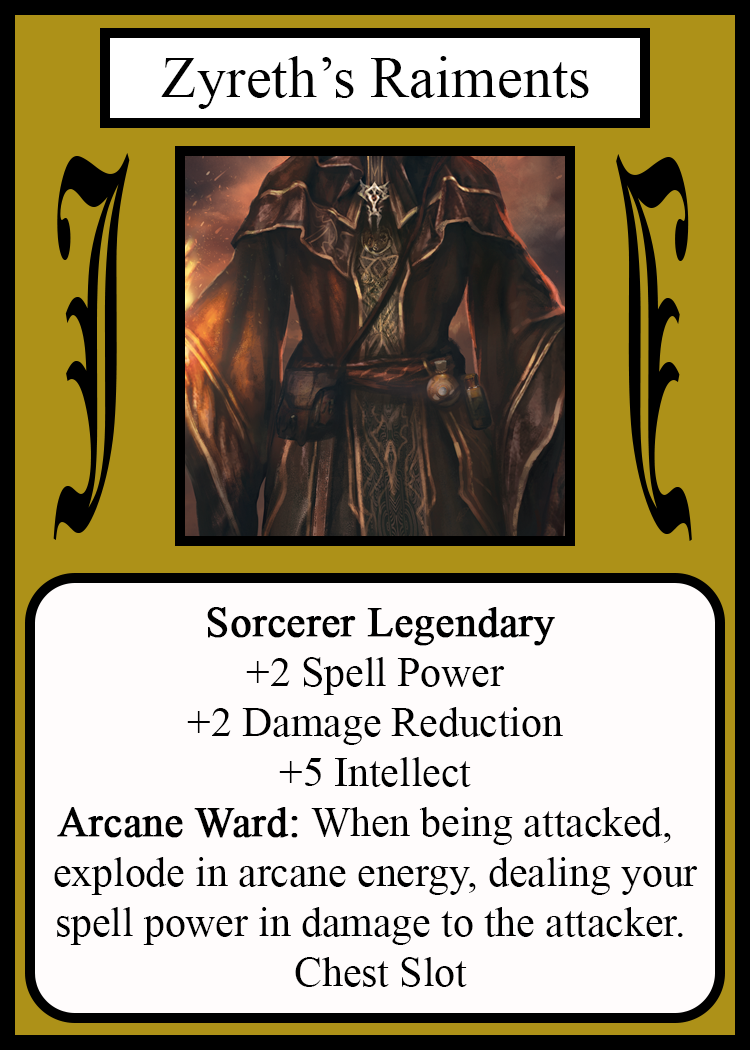
<style>
.page{position:relative;width:750px;height:1050px;background:#fffcfc}
.page>*{position:absolute;margin:0}
.t1{font:58.3px "TimesNewRomanPSMT";color:#010101}
.t2{font:450.1px "OldEnglishTextMT";color:#000000;scale:0.26 1}
.t3{font:449.7px "OldEnglishTextMT";color:#000000;scale:0.26 1}
.t4{font:41.7px "TimesNewRomanPSMT";color:#000000}
.t5{font:41.7px "TimesNewRomanPSMT";color:#000000;font-weight:bold}
</style>
<div class="page">
<p class="t1" style="left:161px;top:56px;width:428px;height:53px">Zyreth’s Raiments</p>
<p class="t2" style="left:53px;top:153px;width:77px;height:387px">J</p>
<p class="t3" style="left:616px;top:154px;width:76px;height:387px;rotate:180deg">J</p>
<p class="t4" style="left:54px;top:607px;width:644px;height:380px;text-align:center"><span class="t5">Sorcerer Legendary<br></span>+2 Spell Power<br>+2 Damage Reduction<br>+5 Intellect<br><span class="t5">Arcane Ward:</span> When being attacked,  <br>explode in arcane energy, dealing your<br>spell power in damage to the attacker. <br> Chest Slot</p>
</div>
